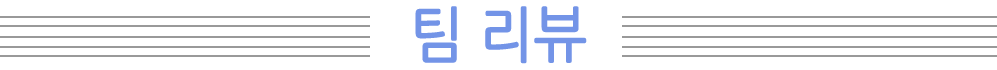
<style>
.page{position:relative;width:997px;height:70px;background:#ffffff}
.page>*{position:absolute;margin:0}
.t1{font:60px "NanumGothic";letter-spacing:-0.025em;color:#7394e7;font-weight:bold;scale:0.95 1}
</style>
<div class="page">
<p class="t1" style="left:415px;top:6px;width:172px;height:58px">팀 리뷰</p>
</div>
